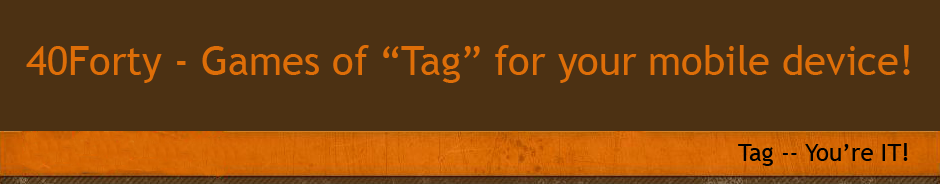
<style>
.page{position:relative;width:940px;height:184px;background:#4c3113}
.page>*{position:absolute;margin:0}
.t1{font:40px "TrebuchetMS";color:#de6e08}
.t2{font:24px "TrebuchetMS";color:#000000}
</style>
<div class="page">
<p class="t1" style="left:26px;top:45px;width:884px;height:38px">40Forty - Games of “Tag” for your mobile device!</p>
<p class="t2" style="left:738px;top:143px;width:170px;height:23px">Tag -- You’re IT!</p>
</div>
